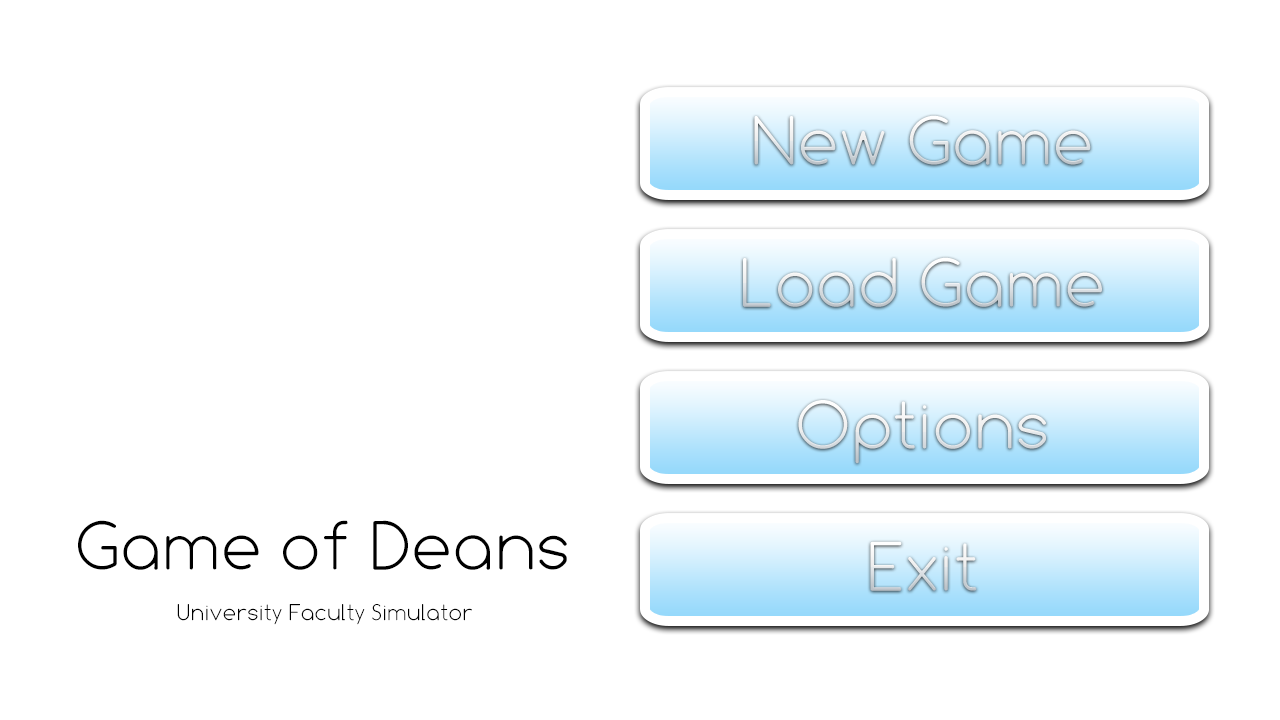
<style>
.page{position:relative;width:1280px;height:720px;background:#ffffff}
.page>*{position:absolute;margin:0}
.t1{font:72px "Comfortaa-Light";color:#eeefee}
.t2{font:72px "Comfortaa-Light";color:#000000}
.t3{font:24px "Comfortaa-Light";color:#000000}
</style>
<div class="page">
<p class="t1" style="left:798px;top:400px;width:248px;height:64px">Options</p>
<p class="t2" style="left:78px;top:520px;width:489px;height:50px">Game of Deans</p>
<p class="t3" style="left:177px;top:604px;width:295px;height:21px">University Faculty Simulator</p>
</div>
